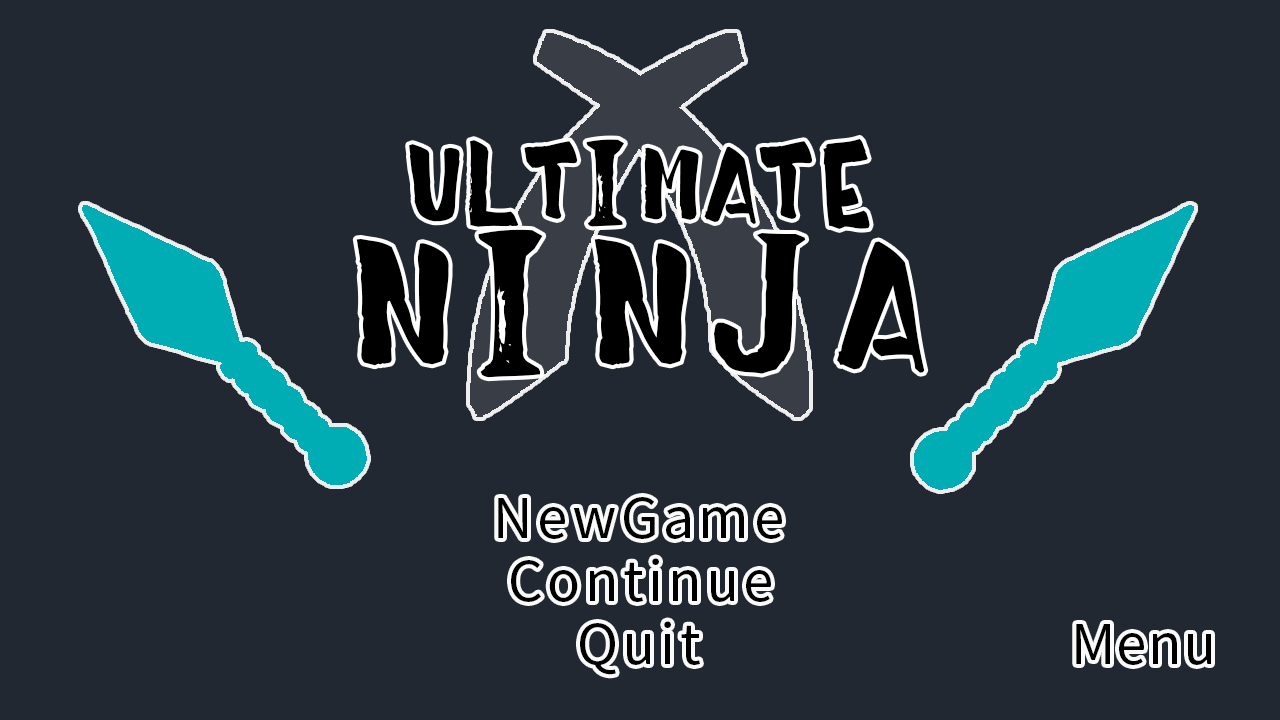
<style>
.page{position:relative;width:1280px;height:720px;background:#222831}
.page>*{position:absolute;margin:0}
.t1{font:113px "AB-taro";letter-spacing:0.02em;color:#000000}
.t2{font:192px "AB-taro";letter-spacing:0.12em;color:#000000}
.t3{font:55px "SourceHanSansJP-Regular";letter-spacing:0.08em;color:#000000}
.t4{font:55px "SourceHanSansJP-Regular";letter-spacing:0.02em;color:#000000}
</style>
<div class="page">
<p class="t1" style="left:409px;top:138px;width:461px;height:91px">ULTIMATE</p>
<p class="t2" style="left:356px;top:229px;width:569px;height:149px">NINJA</p>
<p class="t3" style="left:498px;top:497px;width:284px;height:42px">NewGame</p>
<p class="t3" style="left:511px;top:558px;width:260px;height:44px">Continue</p>
<p class="t3" style="left:580px;top:621px;width:120px;height:54px">Quit</p>
<p class="t4" style="left:1076px;top:624px;width:135px;height:41px">Menu</p>
</div>
